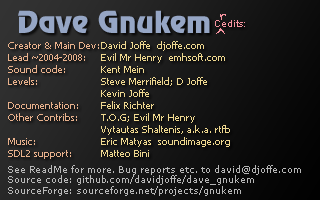
<style>
.page{position:relative;width:320px;height:200px}
.page>*{position:absolute;margin:0}
.t1{font:10px "ArialMT";color:#f794a0}
.t2{font:10px "Tahoma";color:#f7df94}
.t3{font:10px "Tahoma";color:#f7bc94}
.t4{font:9px "Verdana";color:#b7b7b7}
</style>
<div class="page">
<p class="t1" style="left:215px;top:20px;width:30px;height:7px">Cedits:</p>
<p class="t2" style="left:101px;top:41px;width:129px;height:116px;opacity:0.95">David Joffe  djoffe.com<br>Evil Mr Henry  emhsoft.com<br>Kent Mein<br>Steve Merrifield; D Joffe<br>Kevin Joffe<br>Felix Richter<br>T.O.G; Evil Mr Henry<br>Vytautas Shaltenis, a.k.a. rtfb<br>Eric Matyas  soundimage.org<br>Matteo Bini</p>
<p class="t3" style="left:8px;top:42px;width:91px;height:117px;opacity:0.9">Creator &amp; Main Dev:<br>Lead ~2004-2008:<br>Sound code:<br>Levels:<br><br>Documentation:<br>Other Contribs:<br><br>Music:<br>SDL2 support:</p>
<p class="t4" style="left:8px;top:165px;width:293px;height:31px">See ReadMe for more. Bug reports etc. to david@djoffe.com<br>Source code: github.com/davidjoffe/dave_gnukem<br>SourceForge: sourceforge.net/projects/gnukem</p>
</div>
